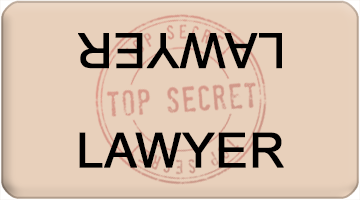
<style>
.page{position:relative;width:360px;height:200px;background:#e8d0bb}
.page>*{position:absolute;margin:0}
.t1{font:48px "ArialMT";color:#000000;font-weight:bold}
</style>
<div class="page">
<p class="t1" style="left:78px;top:33px;width:204px;height:36px;rotate:180deg">LAWYER</p>
<p class="t1" style="left:79px;top:132px;width:205px;height:36px">LAWYER</p>
</div>
